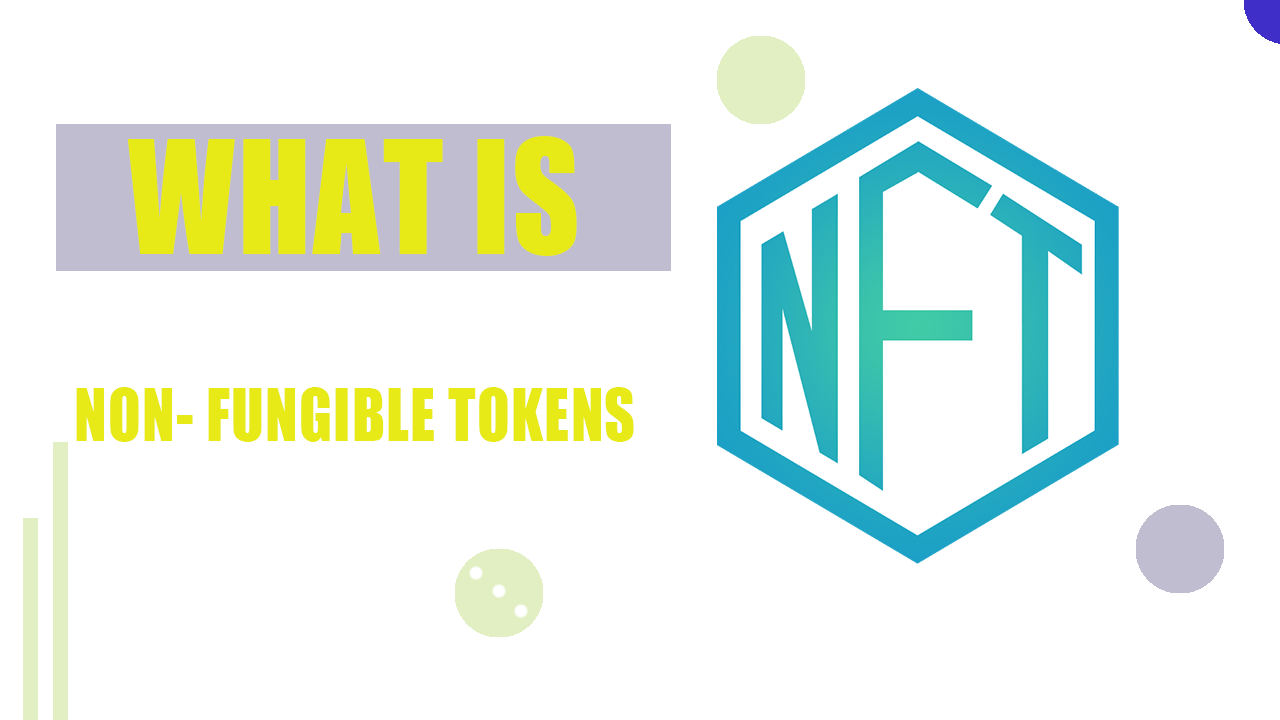
<style>
.page{position:relative;width:1280px;height:720px;background:#ffffff}
.page>*{position:absolute;margin:0}
.t1{font:66.7px/187.5px "Impact";letter-spacing:0.02em;color:#e8ea18;scale:0.9 1}
.t2{font:145.8px/187.5px "Impact";letter-spacing:0.02em;color:#e8ea18;scale:0.9 1}
</style>
<div class="page">
<p class="t1" style="left:76px;top:136px;width:558px;height:306px;text-align:center"><span class="t2">WHAT IS <br></span>NON- FUNGIBLE TOKENS</p>
</div>
